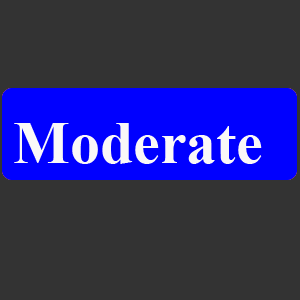
<style>
.page{position:relative;width:300px;height:300px;background:#333333}
.page>*{position:absolute;margin:0}
.t1{font:60px "TimesNewRomanPS-BoldMT";color:#faf8f8}
</style>
<div class="page">
<p class="t1" style="left:14px;top:123px;width:248px;height:41px">Moderate</p>
</div>
